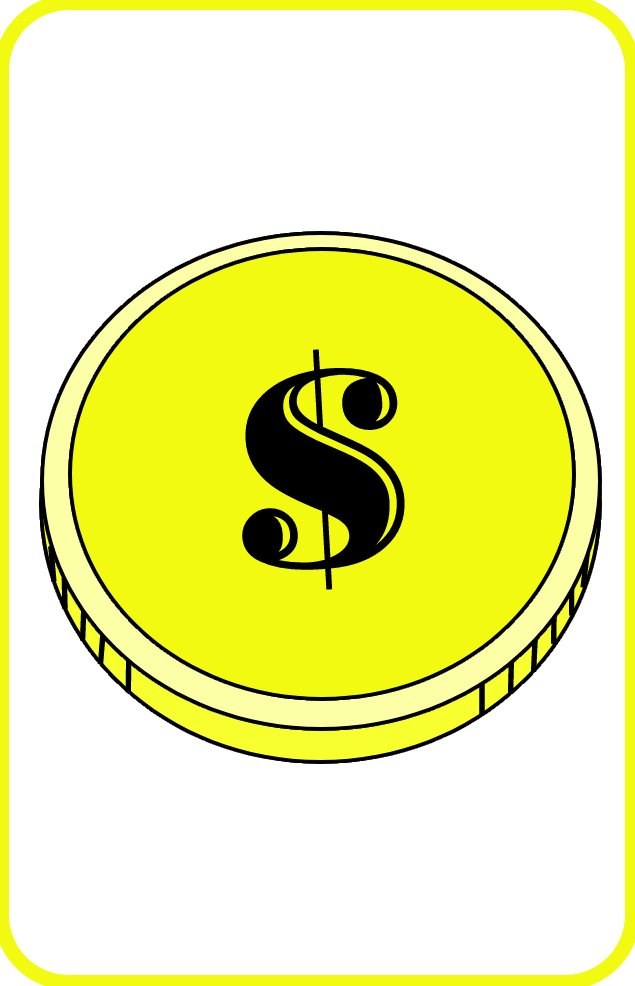
<style>
.page{position:relative;width:635px;height:986px;background:#ffffff}
.page>*{position:absolute;margin:0}
.t1{font:297.5px "BodoniHighlightICG";color:#000000}
</style>
<div class="page">
<p class="t1" style="left:242px;top:349px;width:163px;height:241px;rotate:-3deg">$</p>
</div>
